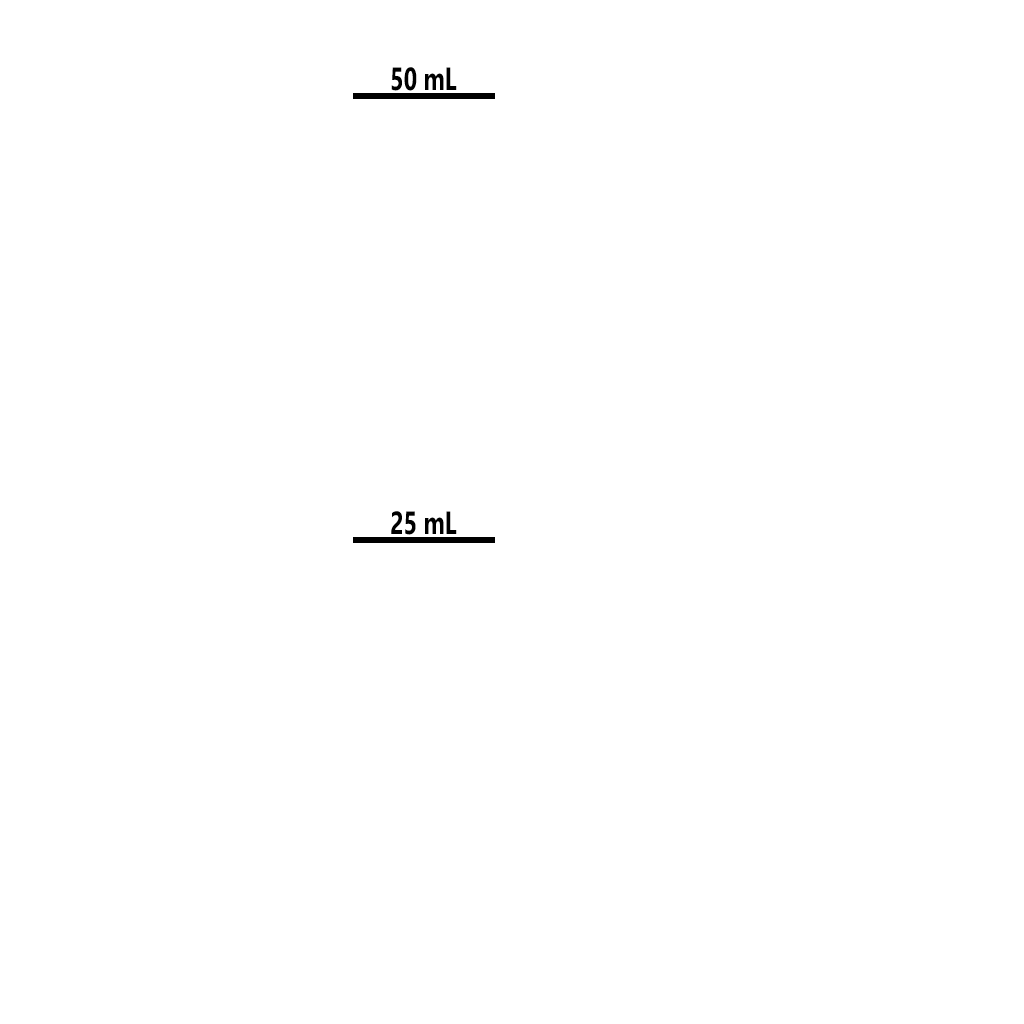
<style>
.page{position:relative;width:1024px;height:1024px;background:#ffffff}
.page>*{position:absolute;margin:0}
.t1{font:32px "Ebrima-Bold";color:#000000;scale:0.73 1}
</style>
<div class="page">
<p class="t1" style="left:391px;top:67px;width:66px;height:24px">50 mL</p>
<p class="t1" style="left:391px;top:511px;width:66px;height:24px">25 mL</p>
</div>
